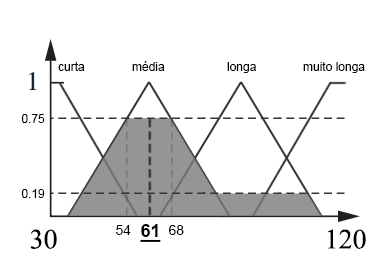
<style>
.page{position:relative;width:386px;height:270px;background:#ffffff}
.page>*{position:absolute;margin:0}
.t1{font:12px "ArialMT";color:#000000}
.t2{font:28px "TimesNewRomanPSMT";color:#000000}
.t3{font:14px "ArialMT";color:#000000}
.t4{font:18px "Arial-BoldMT";color:#000000;text-decoration:underline}
</style>
<div class="page">
<p class="t1" style="left:58px;top:62px;width:27px;height:9px">curta</p>
<p class="t1" style="left:132px;top:61px;width:33px;height:10px">média</p>
<p class="t1" style="left:227px;top:62px;width:29px;height:11px">longa</p>
<p class="t1" style="left:303px;top:62px;width:62px;height:11px">muito longa</p>
<p class="t1" style="left:21px;top:114px;width:24px;height:9px">0.75</p>
<p class="t1" style="left:21px;top:189px;width:24px;height:9px">0.19</p>
<p class="t2" style="left:30px;top:229px;width:27px;height:20px">30</p>
<p class="t3" style="left:116px;top:225px;width:15px;height:10px">54</p>
<p class="t4" style="left:140px;top:224px;width:21px;height:18px">61</p>
<p class="t3" style="left:169px;top:225px;width:15px;height:10px">68</p>
<p class="t2" style="left:327px;top:229px;width:39px;height:20px">120</p>
</div>
